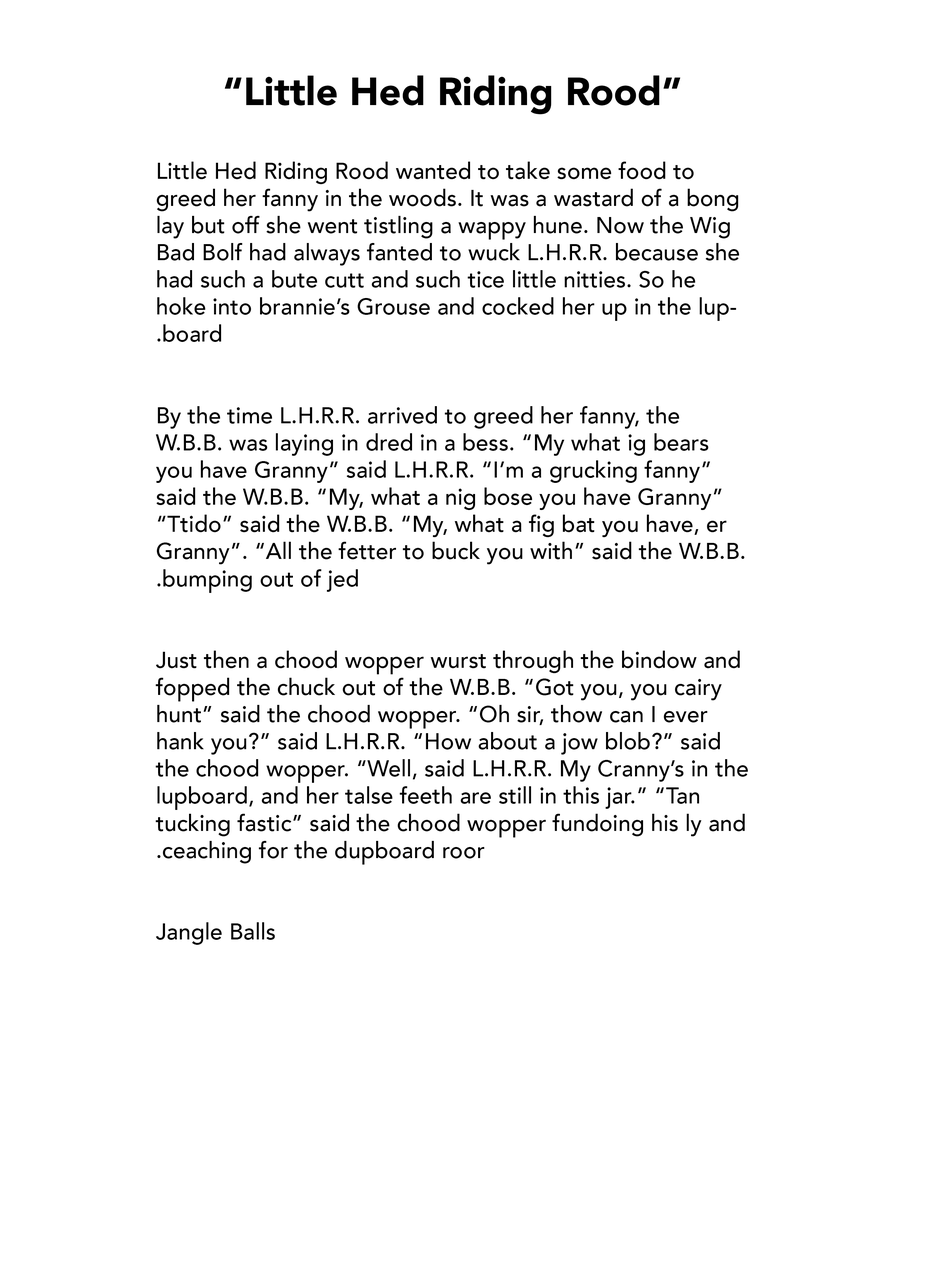
<style>
.page{position:relative;width:931px;height:1281px;background:#ffffff}
.page>*{position:absolute;margin:0}
.t1{font:22.6px "Avenir-Medium";color:#000000}
.t2{font:38.8px "Avenir-Black";color:#000000}
</style>
<div class="page">
<p class="t1" style="left:156px;top:75px;width:592px;height:870px;text-align:center"><span class="t2"><br>“Little Hed Riding Rood”<br><br></span>Little Hed Riding Rood wanted to take some food to greed her fanny in the woods. It was a wastard of a bong lay but off she went tistling a wappy hune. Now the Wig Bad Bolf had always fanted to wuck L.H.R.R. because she had such a bute cutt and such tice little nitties. So he hoke into brannie’s Grouse and cocked her up in the lupboard.<br><br><br>By the time L.H.R.R. arrived to greed her fanny, the W.B.B. was laying in dred in a bess. “My what ig bears you have Granny” said L.H.R.R. “I’m a grucking fanny” said the W.B.B. “My, what a nig bose you have Granny” “Ttido” said the W.B.B. “My, what a fig bat you have, er Granny”. “All the fetter to buck you with” said the W.B.B. bumping out of jed.<br><br><br>Just then a chood wopper wurst through the bindow and fopped the chuck out of the W.B.B. “Got you, you cairy hunt” said the chood wopper. “Oh sir, thow can I ever hank you?” said L.H.R.R. “How about a jow blob?” said the chood wopper. “Well, said L.H.R.R. My Cranny’s in the lupboard, and her talse feeth are still in this jar.” “Tan tucking fastic” said the chood wopper fundoing his ly and ceaching for the dupboard roor.<br><br><br>Jangle Balls</p>
</div>
